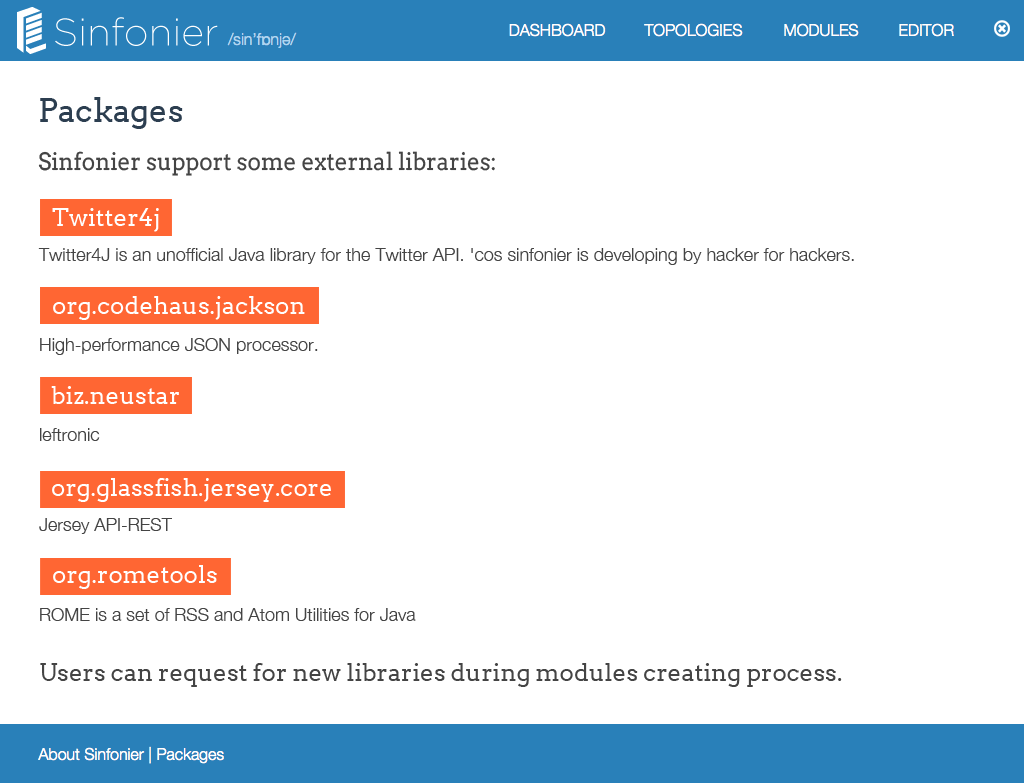
<style>
.page{position:relative;width:1024px;height:783px;background:#ffffff}
.page>*{position:absolute;margin:0}
.t1{font:32px "Arvo";color:#2c3e50}
.t2{font:24px "Arvo";color:#444444;scale:0.94 1}
.t3{font:24px "Arvo";color:#ffffff}
.t4{font:18px/30px "HelveticaNeue-Light";color:#444444}
.t5{font:18px/30px "Arvo";color:#444444}
.t6{font:24px/30px "Arvo";color:#444444}
</style>
<div class="page">
<p class="t1" style="left:40px;top:97px;width:143px;height:32px">Packages</p>
<p class="t2" style="left:38px;top:151px;width:457px;height:25px">Sinfonier support some external libraries:</p>
<p class="t3" style="left:52px;top:208px;width:107px;height:24px">Twitter4j</p>
<p class="t4" style="left:38px;top:248px;width:816px;height:439px"><span class="t5"><br></span>Twitter4J is an unofficial Java library for the Twitter API. 'cos sinfonier is developing by hacker for hackers.<br><br><br>High-performance JSON processor.<br><br><br>leftronic<br><br><br>Jersey API-REST<br><br><br>ROME is a set of RSS and Atom Utilities for Java<br><br><span class="t6">Users can request for new libraries during modules creating process.</span></p>
<p class="t3" style="left:53px;top:296px;width:252px;height:24px">org.codehaus.jackson</p>
<p class="t3" style="left:51px;top:386px;width:128px;height:18px">biz.neustar</p>
<p class="t3" style="left:52px;top:478px;width:279px;height:24px">org.glassfish.jersey.core</p>
<p class="t3" style="left:53px;top:565px;width:164px;height:24px">org.rometools</p>
</div>
